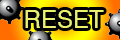
<style>
.page{position:relative;width:120px;height:40px;background:#000000}
.page>*{position:absolute;margin:0}
.t1{font:24px "Helvetica";color:#e9f16e}
</style>
<div class="page">
<p class="t1" style="left:25px;top:10px;width:79px;height:18px">RESET</p>
</div>
